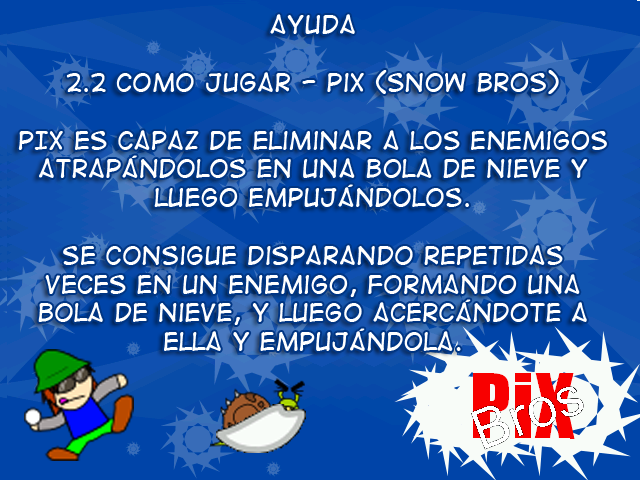
<style>
.page{position:relative;width:640px;height:480px}
.page>*{position:absolute;margin:0}
.t1{font:24px "DigitalStrip2";color:#ffffff}
</style>
<div class="page">
<p class="t1" style="left:18px;top:14px;width:589px;height:337px;text-align:center">AYUDA<br><br>2.2 como jugar - pix (snow bros)<br><br>pIx es capaz de eliminar a los enemigos atrapándolos en una bola de nieve y luego empujándolos.<br><br>se consigue disparando repetidas veces en un enemigo, formando una bola de nieve, y luego acercándote a ella y empujándola.</p>
</div>
